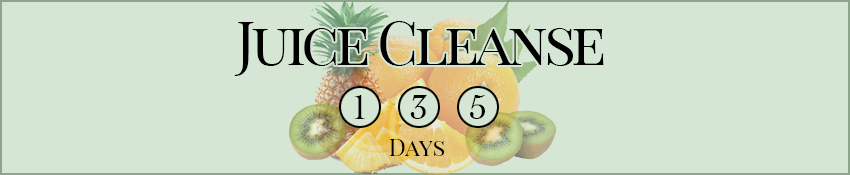
<style>
.page{position:relative;width:850px;height:175px;background:#d5e6d4}
.page>*{position:absolute;margin:0}
.t1{font:60px "PlayfairDisplay-Regular";letter-spacing:-0.075em;color:#000000;font-variant:small-caps}
.t2{font:36px "Cochin";color:#000000;font-variant:small-caps}
.t3{font:24px "PlayfairDisplay-Regular";color:#000000;font-variant:small-caps}
</style>
<div class="page">
<p class="t1" style="left:234px;top:21px;width:370px;height:55px">Juice Cleanse</p>
<p class="t2" style="left:354px;top:95px;width:12px;height:24px">1</p>
<p class="t2" style="left:410px;top:95px;width:17px;height:24px">3</p>
<p class="t2" style="left:470px;top:95px;width:15px;height:24px">5</p>
<p class="t3" style="left:389px;top:139px;width:56px;height:17px">Days</p>
</div>
